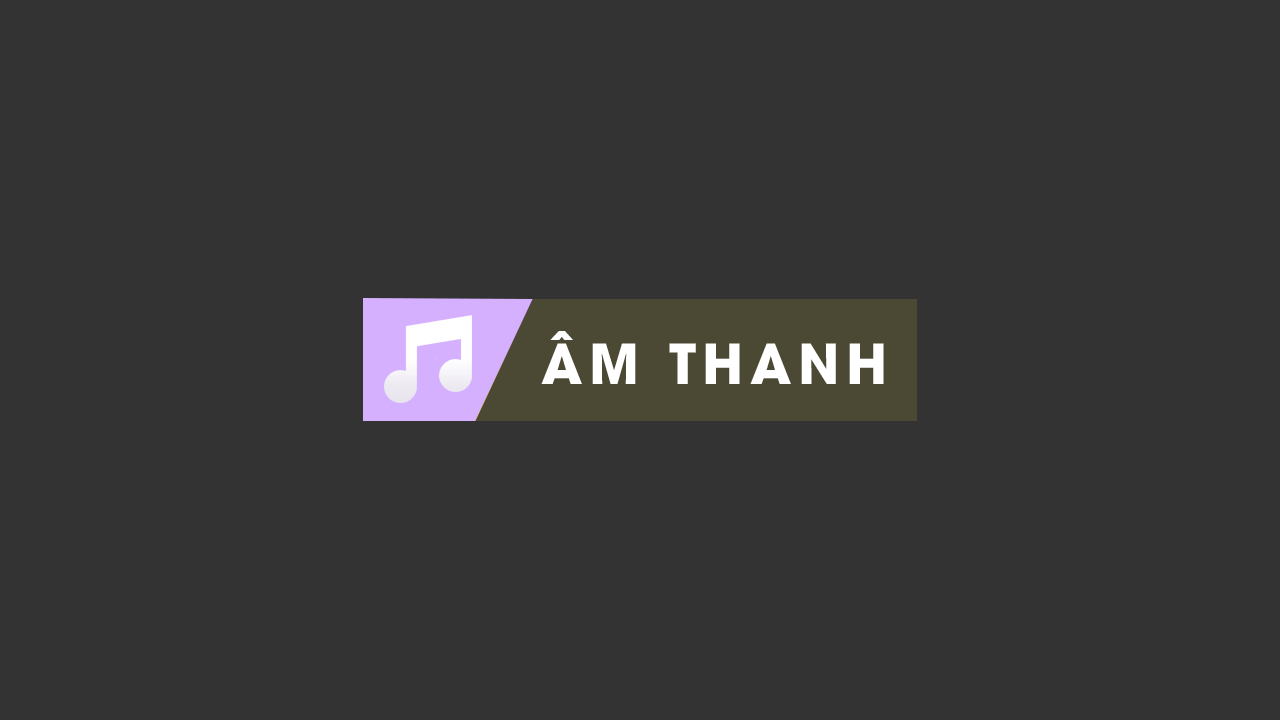
<style>
.page{position:relative;width:1280px;height:720px;background:#333333}
.page>*{position:absolute;margin:0}
.t1{font:54.7px "UTMAvoBold";letter-spacing:0.12em;color:#ffffff}
</style>
<div class="page">
<p class="t1" style="left:541px;top:331px;width:343px;height:53px">ÂM THANH</p>
</div>
